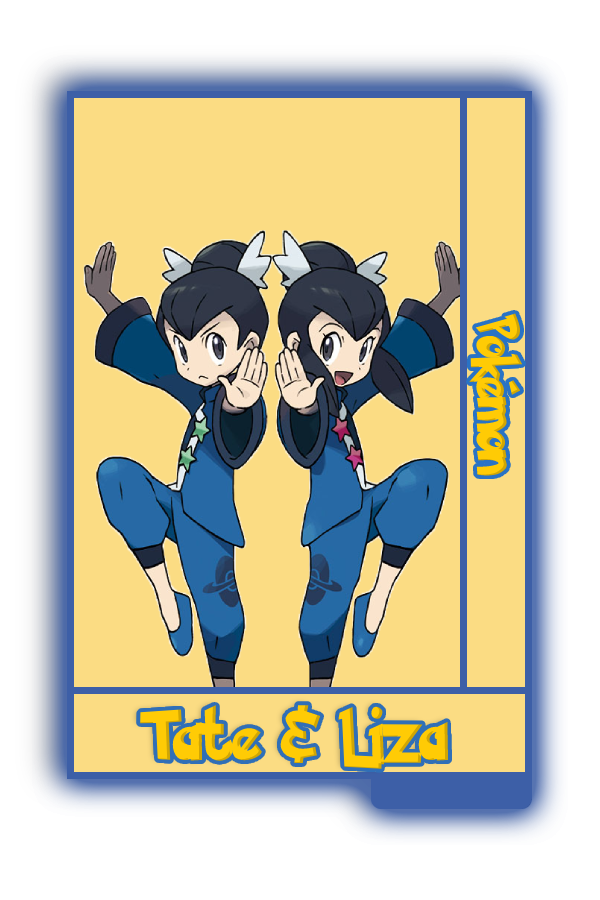
<style>
.page{position:relative;width:600px;height:900px;background:#fbdc83}
.page>*{position:absolute;margin:0}
.t1{font:48.8px "PokemonSolidNormal";color:#ffcb05;scale:0.8 1}
.t2{font:56.6px "PokemonSolidNormal";color:#ffcb05;scale:0.92 1}
</style>
<div class="page">
<p class="t1" style="left:469px;top:313px;width:54px;height:163px;rotate:90deg">Pokémon</p>
<p class="t2" style="left:140px;top:705px;width:309px;height:64px">Tate &amp; Liza</p>
</div>
